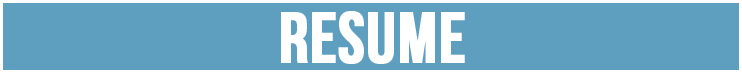
<style>
.page{position:relative;width:742px;height:73px;background:#5e9fc0}
.page>*{position:absolute;margin:0}
.t1{font:72px "BebasNeue";color:#ffffff;font-weight:bold}
</style>
<div class="page">
<p class="t1" style="left:281px;top:11px;width:184px;height:53px">Resume</p>
</div>
